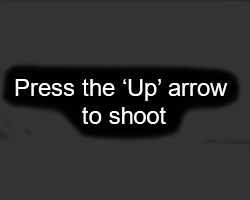
<style>
.page{position:relative;width:250px;height:200px;background:#333333}
.page>*{position:absolute;margin:0}
.t1{font:24px "ArialMT";color:#ffffff}
</style>
<div class="page">
<p class="t1" style="left:15px;top:79px;width:213px;height:45px;text-align:center">Press the ‘Up’ arrow <br>to shoot</p>
</div>
